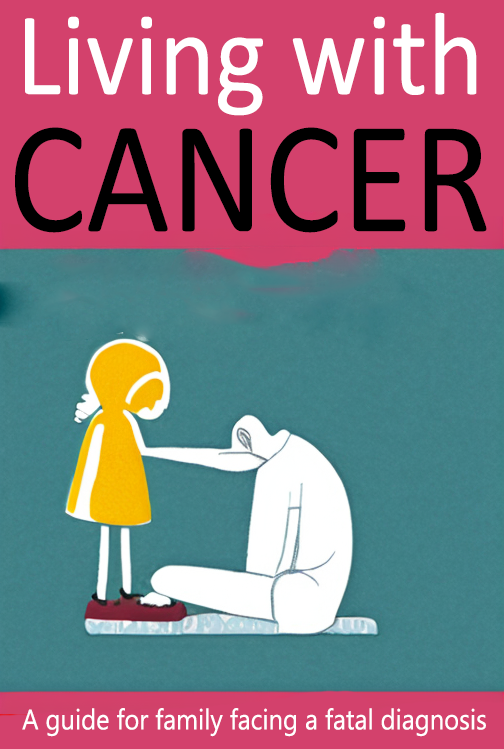
<style>
.page{position:relative;width:504px;height:749px;background:#d3416c}
.page>*{position:absolute;margin:0}
.t1{font:119.2px/45px "Calibri";color:#ffffff;scale:0.9 1}
.t2{font:161.6px/137px "Calibri";color:#000000;scale:0.9 1}
.t3{font:28.3px "LeelawadeeUI";color:#ffffff;scale:0.9 1}
</style>
<div class="page">
<p class="t1" style="left:15px;top:12px;width:472px;height:221px;text-align:center">Living with<br><span class="t2">CANCER</span></p>
<p class="t3" style="left:22px;top:708px;width:464px;height:29px">A guide for family facing a fatal diagnosis</p>
</div>
